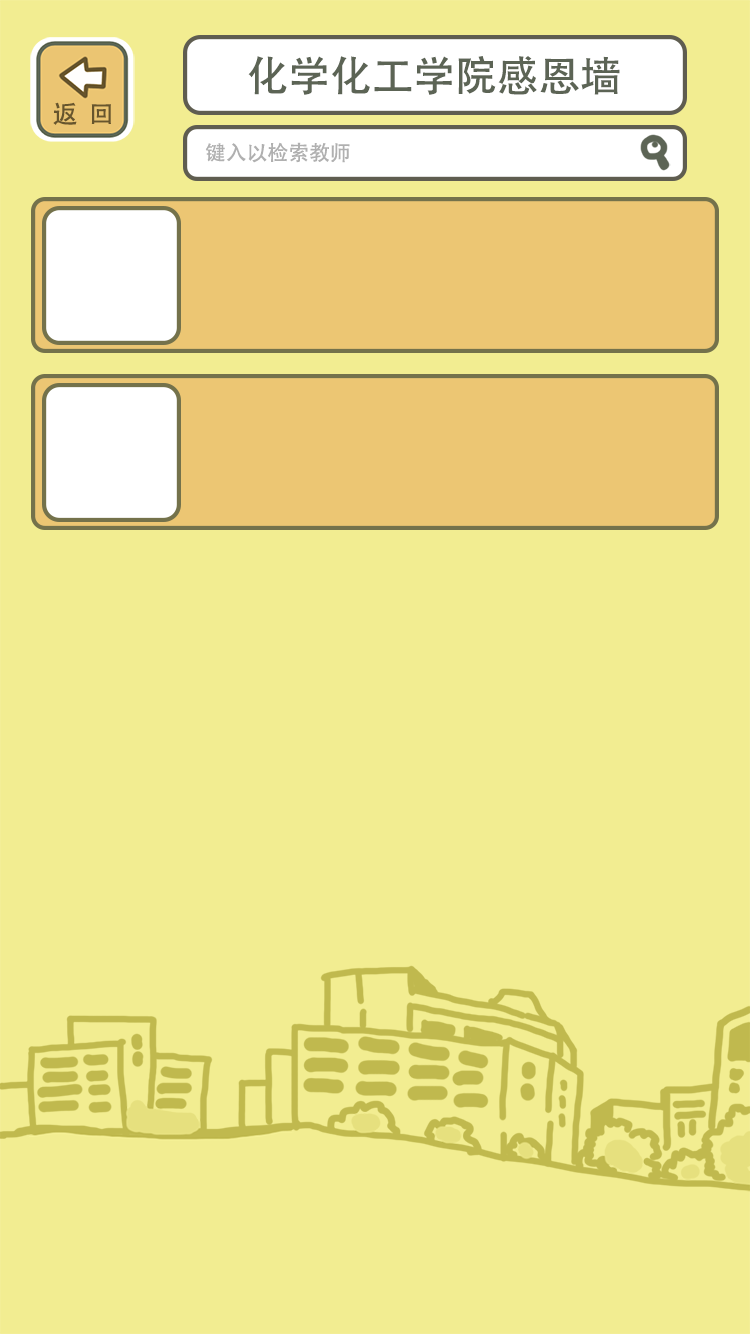
<style>
.page{position:relative;width:750px;height:1334px;background:#f2ed91}
.page>*{position:absolute;margin:0}
.t1{font:41.7px "AdobeHeitiStd-Regular";color:#5c6455}
.t2{font:25px "AdobeHeitiStd-Regular";color:#67552d}
.t3{font:20.8px "AdobeHeitiStd-Regular";color:#b0b0b0}
</style>
<div class="page">
<p class="t1" style="left:248px;top:56px;width:372px;height:39px">化学化工学院感恩墙</p>
<p class="t2" style="left:53px;top:102px;width:58px;height:23px">返  回</p>
<p class="t3" style="left:205px;top:142px;width:145px;height:21px">键入以检索教师</p>
</div>
